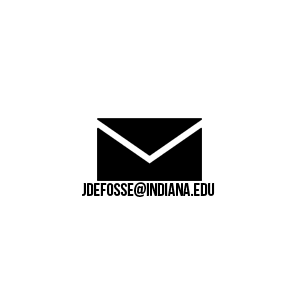
<style>
.page{position:relative;width:299px;height:299px;background:#ffffff}
.page>*{position:absolute;margin:0}
.t1{font:18px "BebasNeue";color:#000000}
</style>
<div class="page">
<p class="t1" style="left:82px;top:182px;width:133px;height:15px">jdefosse@indiana.edu</p>
</div>
